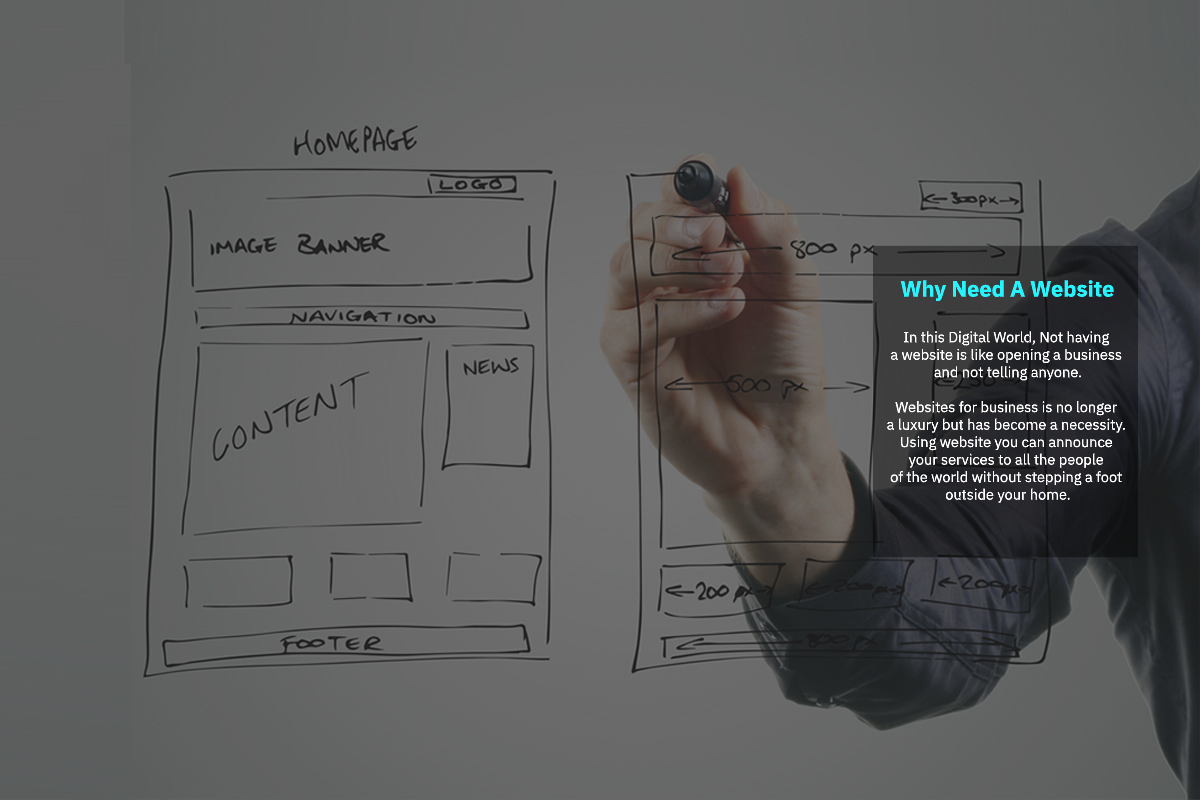
<style>
.page{position:relative;width:1200px;height:800px}
.page>*{position:absolute;margin:0}
.t1{font:21.9px "IBMPlexSans-Bold";color:#26f4ff}
.t2{font:14.6px "IBMPlexSans";color:#ffffff}
</style>
<div class="page">
<p class="t1" style="left:900px;top:280px;width:214px;height:21px">Why Need A Website</p>
<p class="t2" style="left:887px;top:331px;width:238px;height:172px;text-align:center">In this Digital World, Not having <br>a website is like opening a business <br>and not telling anyone.<br><br>Websites for business is no longer <br>a luxury but has become a necessity. <br>Using website you can announce <br>your services to all the people <br>of the world without stepping a foot <br>outside your home.</p>
</div>
